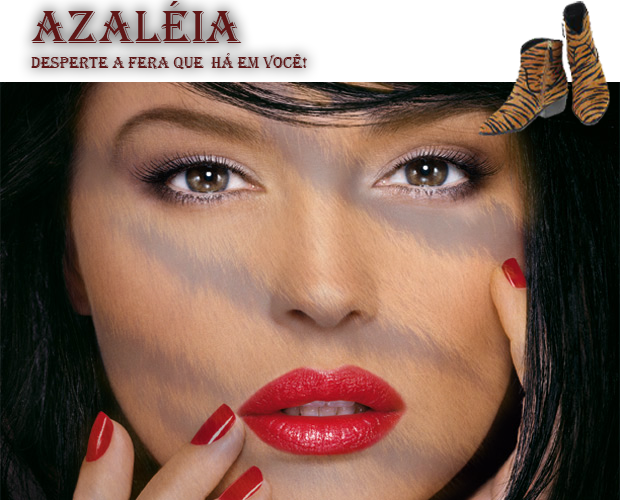
<style>
.page{position:relative;width:620px;height:500px}
.page>*{position:absolute;margin:0}
.t1{font:48px "Algerian";color:#601616}
.t2{font:16px "Algerian";color:#601616}
</style>
<div class="page">
<p class="t1" style="left:31px;top:1px;width:211px;height:42px">Azaléia</p>
<p class="t2" style="left:31px;top:53px;width:276px;height:17px">Desperte a fera que  há em você!</p>
</div>
